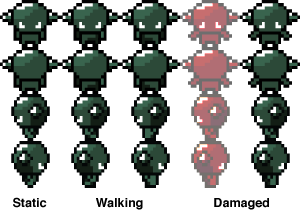
<style>
.page{position:relative;width:300px;height:216px;background:#ffffff}
.page>*{position:absolute;margin:0}
.t1{font:12.5px "Helvetica-Bold";color:#000000}
</style>
<div class="page">
<p class="t1" style="left:13px;top:197px;width:34px;height:11px">Static</p>
<p class="t1" style="left:96px;top:198px;width:47px;height:12px">Walking</p>
<p class="t1" style="left:214px;top:198px;width:55px;height:12px">Damaged</p>
</div>
